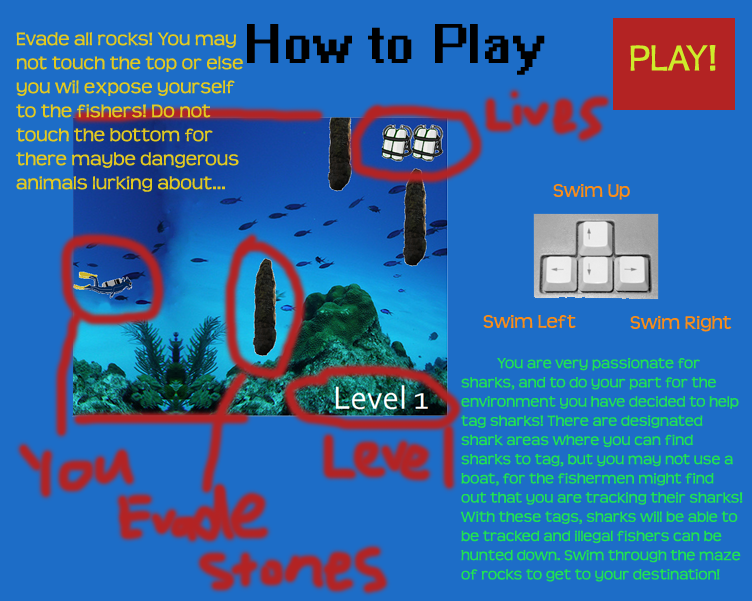
<style>
.page{position:relative;width:752px;height:601px;background:#1d6dc7}
.page>*{position:absolute;margin:0}
.t1{font:50px "System";color:#000000}
.t2{font:20px "Teen";color:#e2c920}
.t3{font:40px "Teen";color:#ceeb2b}
.t4{font:20px "Teen";color:#fa8d18}
.t5{font:16px "Teen";color:#20e252}
</style>
<div class="page">
<p class="t1" style="left:247px;top:24px;width:298px;height:51px">How to Play</p>
<p class="t2" style="left:16px;top:32px;width:227px;height:160px">Evade all rocks! You may not touch the top or else you wil expose yourself to the fishers! Do not touch the bottom for there maybe dangerous animals lurking about...</p>
<p class="t3" style="left:630px;top:45px;width:86px;height:26px">PLAY!</p>
<p class="t4" style="left:553px;top:184px;width:77px;height:16px">Swim Up</p>
<p class="t4" style="left:630px;top:316px;width:102px;height:16px">Swim Right</p>
<p class="t5" style="left:460px;top:358px;width:283px;height:224px">You are very passionate for sharks, and to do your part for the environment you have decided to help tag sharks! There are designated shark areas where you can find sharks to tag, but you may not use a boat, for the fishermen might find out that you are tracking their sharks! With these tags, sharks will be able to be tracked and illegal fishers can be hunted down. Swim through the maze of rocks to get to your destination!</p>
</div>
